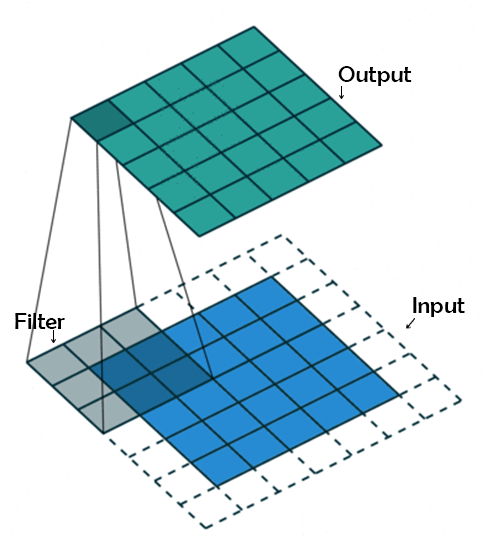
<style>
.page{position:relative;width:488px;height:555px;background:#ffffff}
.page>*{position:absolute;margin:0}
.t1{font:24px "BerlinSansFB-Reg";color:#000000}
</style>
<div class="page">
<p class="t1" style="left:338px;top:66px;width:74px;height:20px">Output</p>
<p class="t1" style="left:413px;top:297px;width:52px;height:20px">Input</p>
<p class="t1" style="left:15px;top:313px;width:50px;height:16px">Filter</p>
</div>
